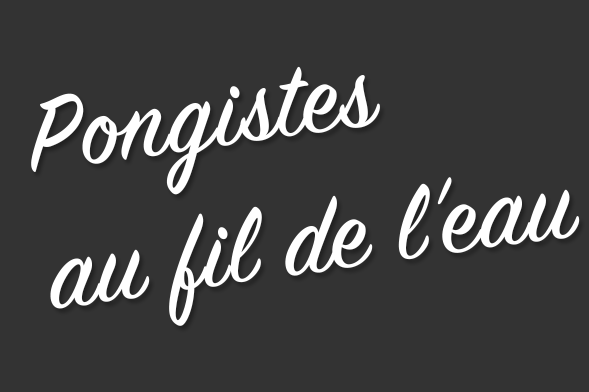
<style>
.page{position:relative;width:589px;height:392px;background:#333333}
.page>*{position:absolute;margin:0}
.t1{font:115px "SignPainter-HouseScript";letter-spacing:0.02em;color:#ffffff}
</style>
<div class="page">
<p class="t1" style="left:31px;top:66px;width:549px;height:260px;rotate:-8deg">Pongistes <br>au fil de l’eau</p>
</div>
